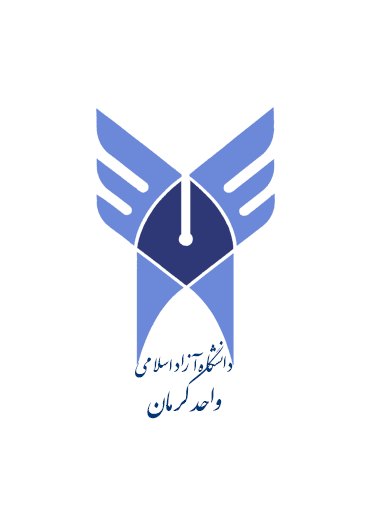
<style>
.page{position:relative;width:372px;height:527px;background:#ffffff}
.page>*{position:absolute;margin:0}
.t1{font:33.3px/38.7px "IranNastaliq";color:#003777}
.t2{font:42.7px/38.7px "IranNastaliq";color:#003777}
</style>
<div class="page">
<p class="t1" style="left:135px;top:341px;width:98px;height:78px;text-align:center">دانشگاه آزاد اسلامی<br><span class="t2">واحد کرمان</span></p>
</div>
